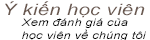
<style>
.page{position:relative;width:150px;height:40px;background:#ffffff}
.page>*{position:absolute;margin:0}
.t1{font:15.6px "Arial-ItalicMT";letter-spacing:0.025em;color:#6a5950;scale:1.28 1}
.t2{font:10.6px "Arial-ItalicMT";letter-spacing:0.025em;color:#000000;scale:1.18 1}
</style>
<div class="page">
<p class="t1" style="left:5px;top:1px;width:140px;height:17px">Ý kiến học viên</p>
<p class="t2" style="left:21px;top:18px;width:125px;height:23px">Xem đánh giá của <br>học viên về chúng tôi</p>
</div>
